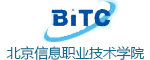
<style>
.page{position:relative;width:150px;height:60px;background:#ffffff}
.page>*{position:absolute;margin:0}
.t1{font:14px "MicrosoftYaHei";letter-spacing:-0.02em;color:#0b6e8d}
</style>
<div class="page">
<p class="t1" style="left:7px;top:46px;width:137px;height:14px">北京信息职业技术学院</p>
</div>
